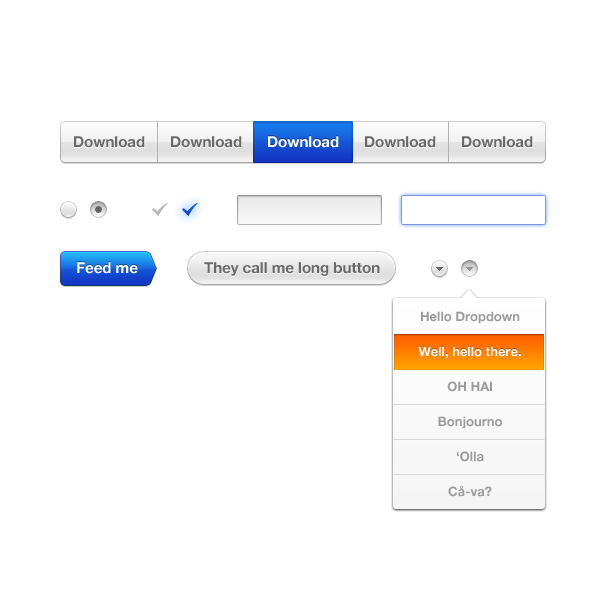
<style>
.page{position:relative;width:600px;height:600px;background:#ffffff}
.page>*{position:absolute;margin:0}
.t1{font:15px "HelveticaNeue-Bold";color:#696969}
.t2{font:15px "HelveticaNeue-Bold";color:#ffffff}
.t3{font:13px/35px "HelveticaNeue-Bold";color:#9b9b9b}
.t4{font:13px/35px "HelveticaNeue-Bold";color:#ffffff}
</style>
<div class="page">
<p class="t1" style="left:74px;top:136px;width:71px;height:12px">Download</p>
<p class="t1" style="left:171px;top:136px;width:71px;height:12px">Download</p>
<p class="t2" style="left:268px;top:136px;width:71px;height:12px">Download</p>
<p class="t1" style="left:365px;top:136px;width:71px;height:12px">Download</p>
<p class="t1" style="left:462px;top:136px;width:71px;height:12px">Download</p>
<p class="t2" style="left:77px;top:262px;width:61px;height:12px">Feed me</p>
<p class="t1" style="left:204px;top:262px;width:176px;height:14px">They call me long button</p>
<p class="t3" style="left:418px;top:311px;width:103px;height:186px;text-align:center">Hello Dropdown<br><span class="t4">Well, hello there.<br></span>OH HAI<br>Bonjourno<br>‘Olla<br>Cå-va?</p>
</div>
